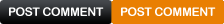
<style>
.page{position:relative;width:224px;height:24px;background:#e97f02}
.page>*{position:absolute;margin:0}
.t1{font:12px "ArialRoundedMTBold";letter-spacing:-0.025em;color:#ffffff}
</style>
<div class="page">
<p class="t1" style="left:9px;top:7px;width:95px;height:9px">POST COMMENT</p>
<p class="t1" style="left:121px;top:7px;width:95px;height:9px">POST COMMENT</p>
</div>
